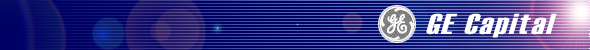
<style>
.page{position:relative;width:590px;height:50px}
.page>*{position:absolute;margin:0}
.t1{font:30px "Haettenschweiler";letter-spacing:0.06em;color:#ffffff;scale:1.2 1}
</style>
<div class="page">
<p class="t1" style="left:426px;top:13px;width:131px;height:25px">GE Capital</p>
</div>
